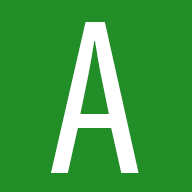
<style>
.page{position:relative;width:192px;height:192px;background:#218e27}
.page>*{position:absolute;margin:0}
.t1{font:224.7px "MyriadPro-Cond";color:#ffffff}
</style>
<div class="page">
<p class="t1" style="left:51px;top:22px;width:88px;height:151px">A</p>
</div>
